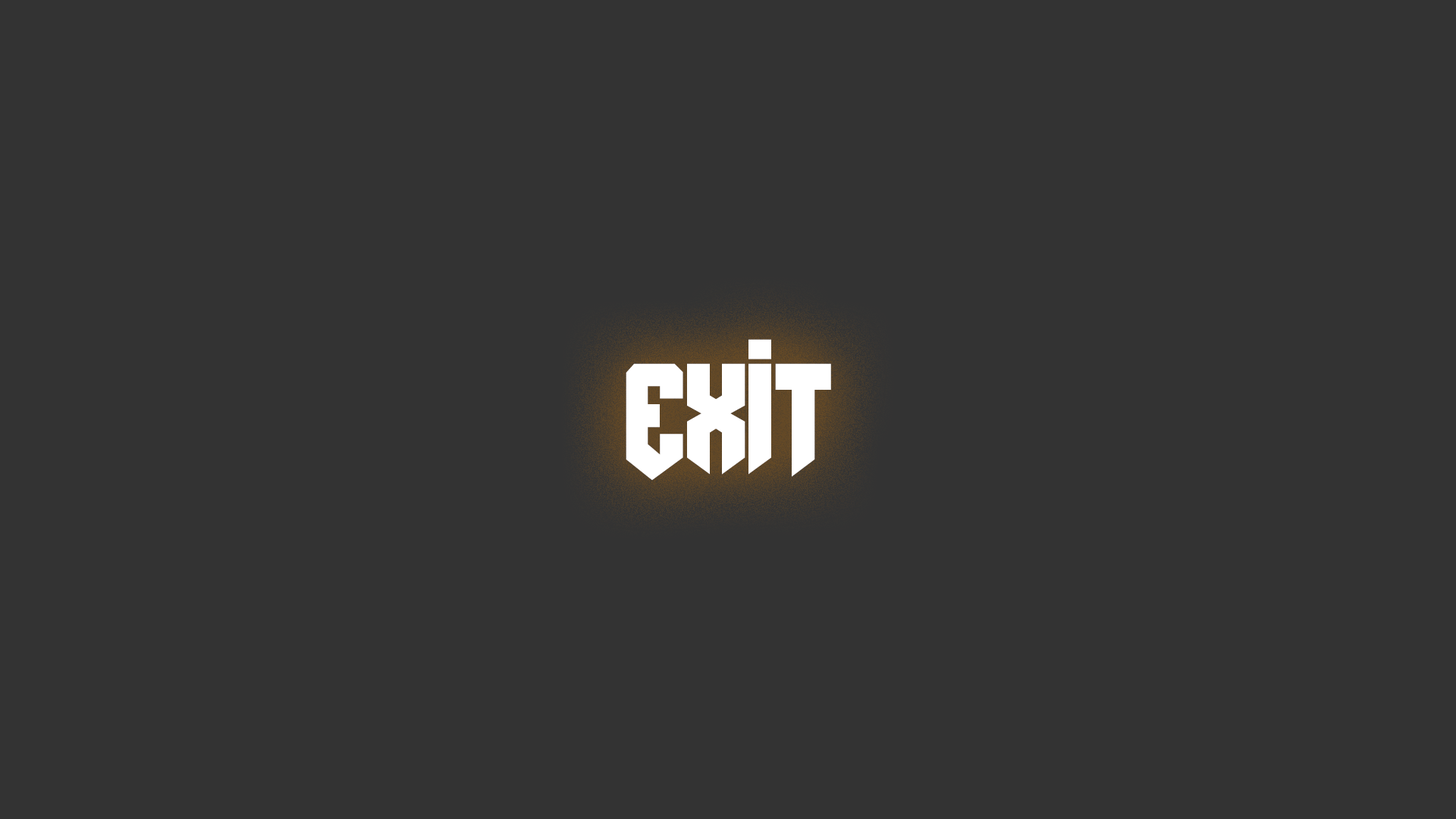
<style>
.page{position:relative;width:1456px;height:819px;background:#333333}
.page>*{position:absolute;margin:0}
.t1{font:186.4px "AmazDooMLeft";color:#ffffff}
</style>
<div class="page">
<p class="t1" style="left:626px;top:339px;width:205px;height:141px">exit</p>
</div>
